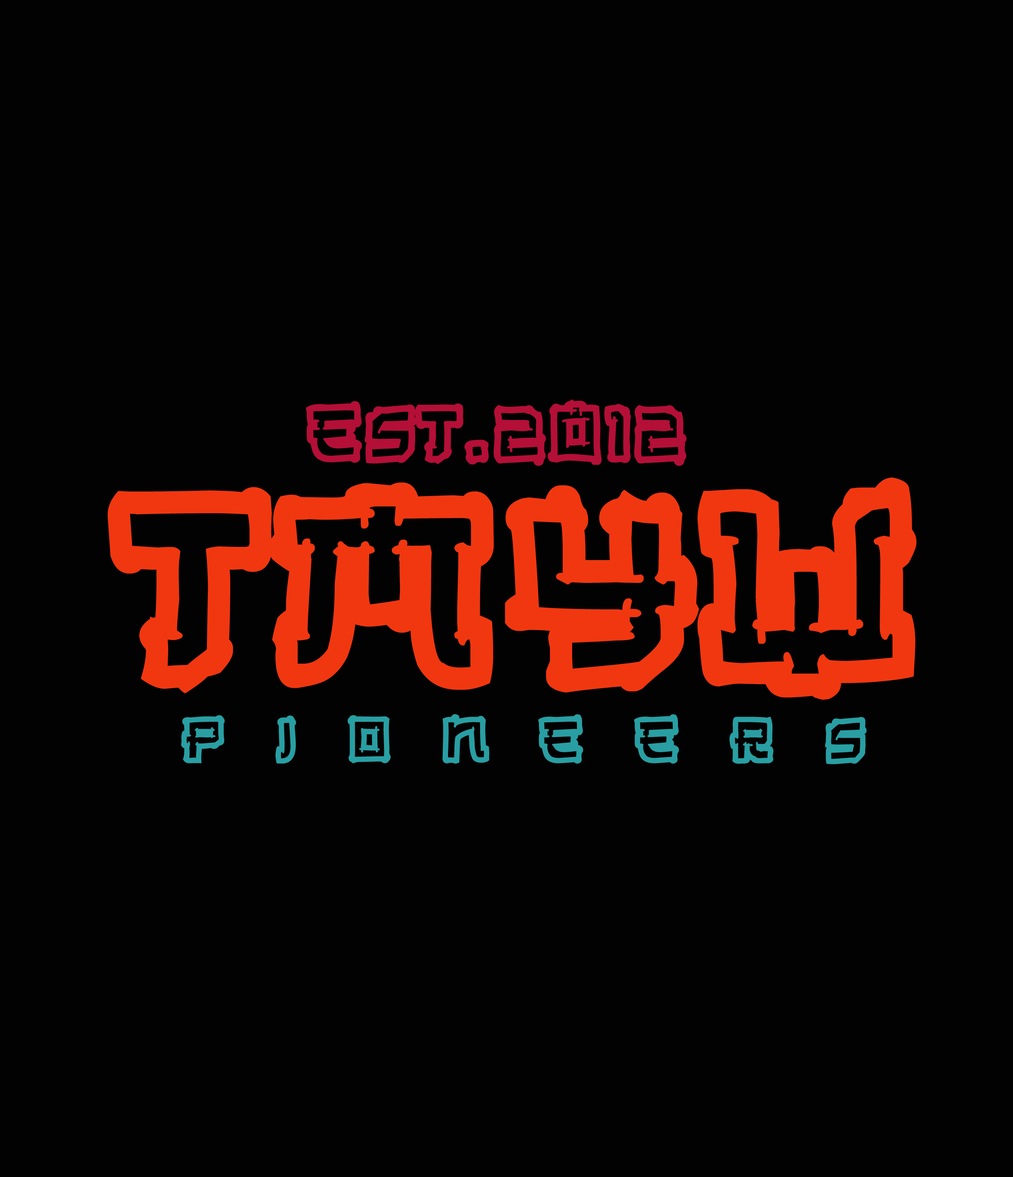
<style>
.page{position:relative;width:1013px;height:1177px;background:#020202}
.page>*{position:absolute;margin:0}
.t1{font:83.4px "OldJapanese";color:#b40f37}
.t2{font:66.7px "OldJapanese";color:#299fa3}
</style>
<div class="page">
<p class="t1" style="left:306px;top:399px;width:381px;height:67px">est.2012</p>
<p class="t2" style="left:181px;top:714px;width:686px;height:50px">p   i   o   n   e   e   r   s</p>
</div>
